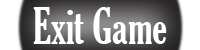
<style>
.page{position:relative;width:200px;height:50px;background:#ffffff}
.page>*{position:absolute;margin:0}
.t1{font:48px "GloucesterMT-ExtraCondensed";color:#ffffff}
</style>
<div class="page">
<p class="t1" style="left:33px;top:7px;width:134px;height:37px">Exit Game</p>
</div>
